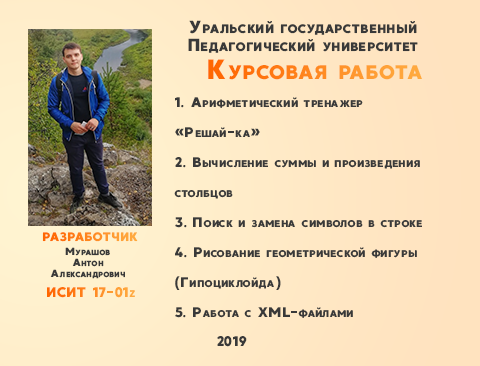
<style>
.page{position:relative;width:480px;height:366px}
.page>*{position:absolute;margin:0}
.t1{font:30px/18px "MADEGoodTimeGrotesk";color:#393939;font-variant:small-caps}
.t2{font:24px/30px "MADEGoodTimeGrotesk";color:#393939;font-variant:small-caps}
.t3{font:18px/11px "MADEGoodTimeGrotesk";color:#393939;font-variant:small-caps}
.t4{font:24px "MADEGoodTimeGrotesk";color:#393939;font-variant:small-caps}
</style>
<div class="page">
<p class="t1" style="left:188px;top:20px;width:230px;height:33px;text-align:center">Уральский государственный<br>Педагогический университет</p>
<p class="t2" style="left:174px;top:97px;width:248px;height:221px">1. Арифметический тренажер<br>«Решай-ка»<br>2. Вычисление суммы и произведения<br>столбцов<br>3. Поиск и замена символов в строке<br>4. Рисование геометрической фигуры <br>(Гипоциклойда)<br>5. Работа с XML-файлами</p>
<p class="t3" style="left:50px;top:247px;width:75px;height:32px;text-align:center">Мурашов<br>Антон<br>Александрович</p>
<p class="t4" style="left:217px;top:336px;width:30px;height:11px">2019</p>
</div>
